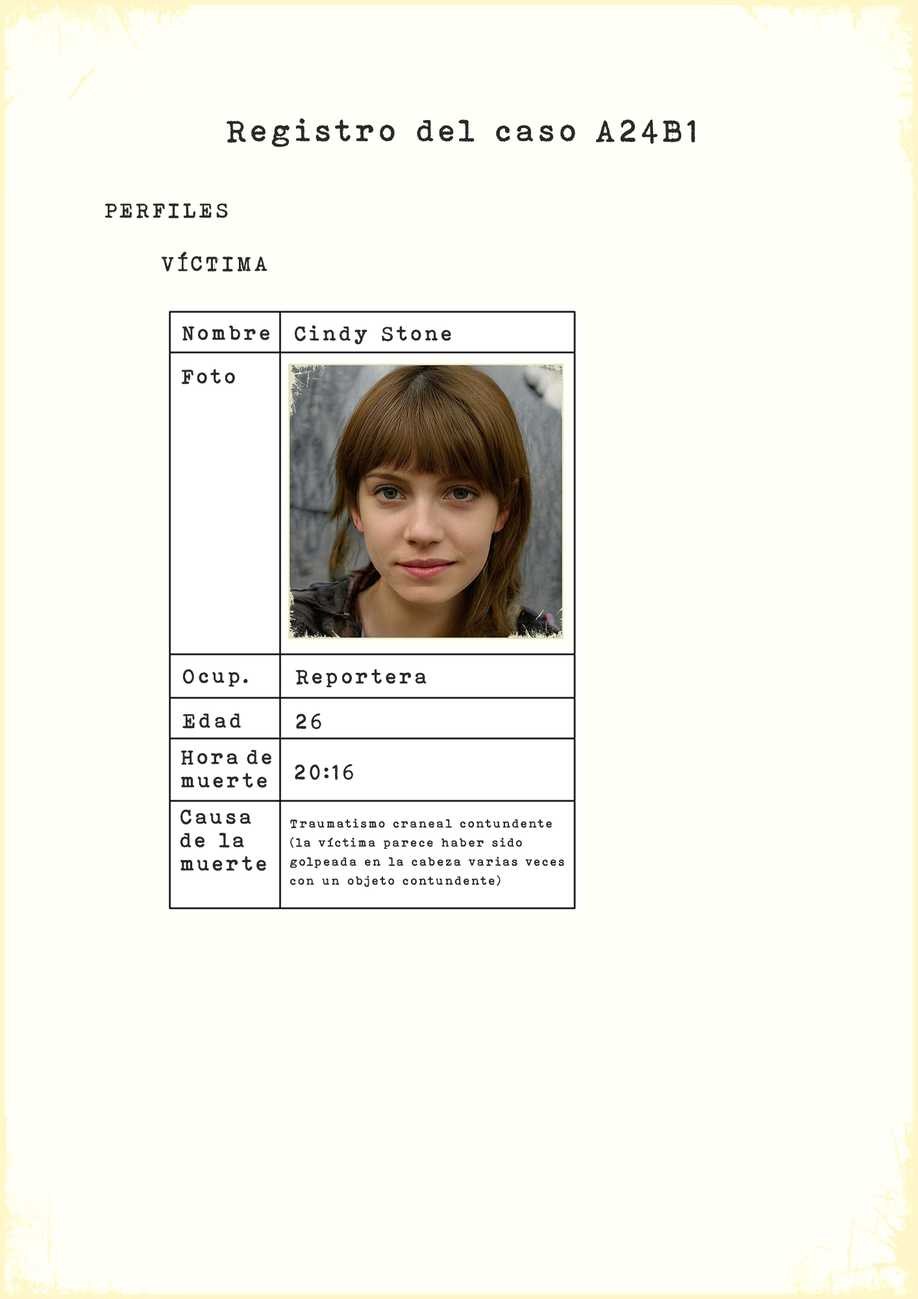
<style>
.page{position:relative;width:918px;height:1299px;background:#fffff7}
.page>*{position:absolute;margin:0}
.t1{font:31.2px "BohemianTypewriter";letter-spacing:0.1em;color:#292929}
.t2{font:20.8px "BohemianTypewriter";letter-spacing:0.1em;color:#292929}
.t3{font:20.8px/23.4px "BohemianTypewriter";letter-spacing:0.1em;color:#292929}
.t4{font:12.1px/19.1px "BohemianTypewriter";letter-spacing:0.1em;color:#292929}
</style>
<div class="page">
<p class="t1" style="left:227px;top:118px;width:468px;height:29px">Registro del caso A24B1</p>
<p class="t2" style="left:105px;top:203px;width:123px;height:16px">PERFILES</p>
<p class="t2" style="left:161px;top:251px;width:107px;height:21px">VÍCTIMA</p>
<p class="t2" style="left:182px;top:325px;width:87px;height:16px">Nombre</p>
<p class="t2" style="left:295px;top:325px;width:156px;height:20px">Cindy Stone</p>
<p class="t2" style="left:181px;top:369px;width:54px;height:15px">Foto</p>
<p class="t2" style="left:182px;top:669px;width:66px;height:18px">Ocup.</p>
<p class="t2" style="left:295px;top:669px;width:132px;height:19px">Reportera</p>
<p class="t2" style="left:182px;top:713px;width:59px;height:16px">Edad</p>
<p class="t2" style="left:296px;top:713px;width:25px;height:16px">26</p>
<p class="t3" style="left:181px;top:749px;width:90px;height:39px">Hora de<br>muerte</p>
<p class="t2" style="left:295px;top:764px;width:58px;height:16px">20:16</p>
<p class="t3" style="left:180px;top:809px;width:86px;height:62px">Causa<br>de la<br>muerte</p>
<p class="t4" style="left:290px;top:818px;width:274px;height:69px">Traumatismo craneal contundente<br>(la víctima parece haber sido<br>golpeada en la cabeza varias veces<br>con un objeto contundente)</p>
</div>
